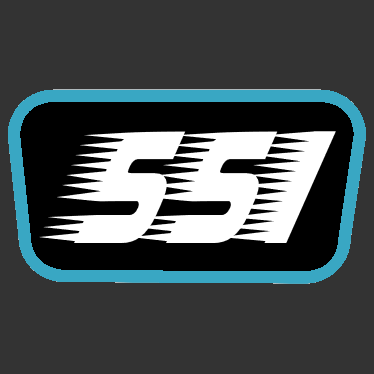
<style>
.page{position:relative;width:374px;height:374px;background:#333333}
.page>*{position:absolute;margin:0}
.t1{font:149px "Barbatrick-Regular";color:#ffffff}
</style>
<div class="page">
<p class="t1" style="left:38px;top:131px;width:298px;height:112px">SSI</p>
</div>
